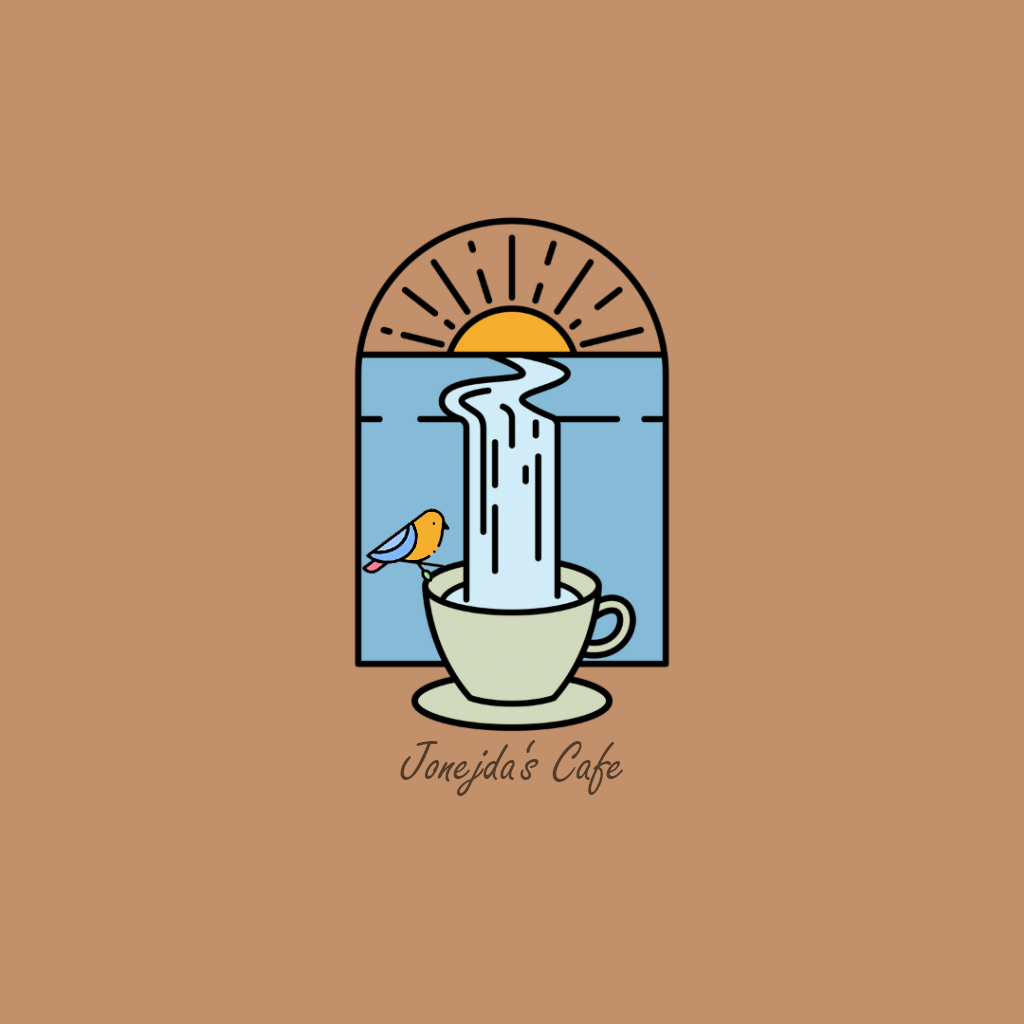
<style>
.page{position:relative;width:1024px;height:1024px;background:#c2906a}
.page>*{position:absolute;margin:0}
.t1{font:60px "FreestyleScript-Regular";color:#543c2a}
</style>
<div class="page">
<p class="t1" style="left:400px;top:740px;width:223px;height:56px">Jonejda‘s Cafe</p>
</div>
